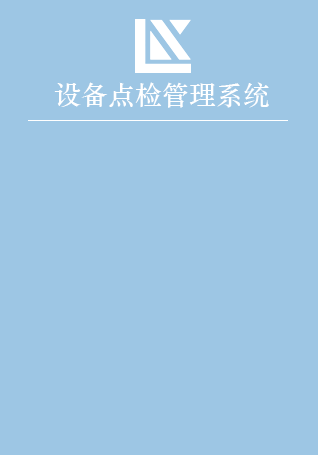
<style>
.page{position:relative;width:318px;height:455px;background:#9dc6e4}
.page>*{position:absolute;margin:0}
.t1{font:27px "STZhongsong";color:#ffffff}
</style>
<div class="page">
<p class="t1" style="left:54px;top:82px;width:215px;height:26px">设备点检管理系统</p>
</div>
